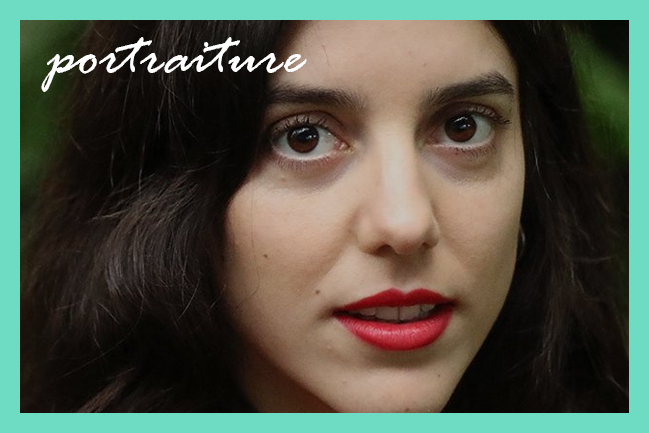
<style>
.page{position:relative;width:649px;height:433px}
.page>*{position:absolute;margin:0}
.t1{font:64px "RageItalic";color:#ffffff}
</style>
<div class="page">
<p class="t1" style="left:41px;top:37px;width:266px;height:55px">portraiture</p>
</div>
